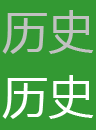
<style>
.page{position:relative;width:96px;height:130px;background:#339933}
.page>*{position:absolute;margin:0}
.t1{font:45.8px "MicrosoftYaHei";color:#c1c1c1}
.t2{font:45.8px "MicrosoftYaHei";color:#ffffff}
</style>
<div class="page">
<p class="t1" style="left:2px;top:10px;width:92px;height:44px">历史</p>
<p class="t2" style="left:2px;top:75px;width:92px;height:44px">历史</p>
</div>
